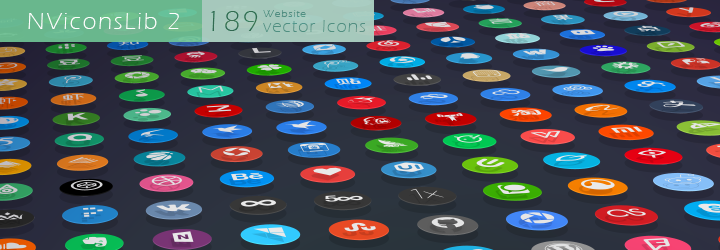
<style>
.page{position:relative;width:720px;height:250px}
.page>*{position:absolute;margin:0}
.t1{font:23.8px "ErasITC-Light";letter-spacing:0.087em;color:#ffffff}
.t2{font:30px "ErasITC-Light";letter-spacing:0.087em;color:#316b50}
.t3{font:18px "ErasITC-Light";letter-spacing:0.087em;color:#316b50}
.t4{font:18px/9.4px "ErasITC-Light";letter-spacing:0.067em;color:#508f81}
.t5{font:11px/9.4px "ErasITC-Light";letter-spacing:0.087em;color:#508f81}
</style>
<div class="page">
<p class="t1" style="left:28px;top:13px;width:151px;height:16px">NViconsLib 2</p>
<p class="t2" style="left:211px;top:11px;width:47px;height:20px"><span class="t3">  </span>189</p>
<p class="t2" style="left:211px;top:11px;width:47px;height:20px"><span class="t3">  </span>189</p>
<p class="t4" style="left:263px;top:10px;width:102px;height:22px"><span class="t5">Website <br></span>vector Icons</p>
<p class="t4" style="left:263px;top:10px;width:102px;height:22px"><span class="t5">Website <br></span>vector Icons</p>
</div>
